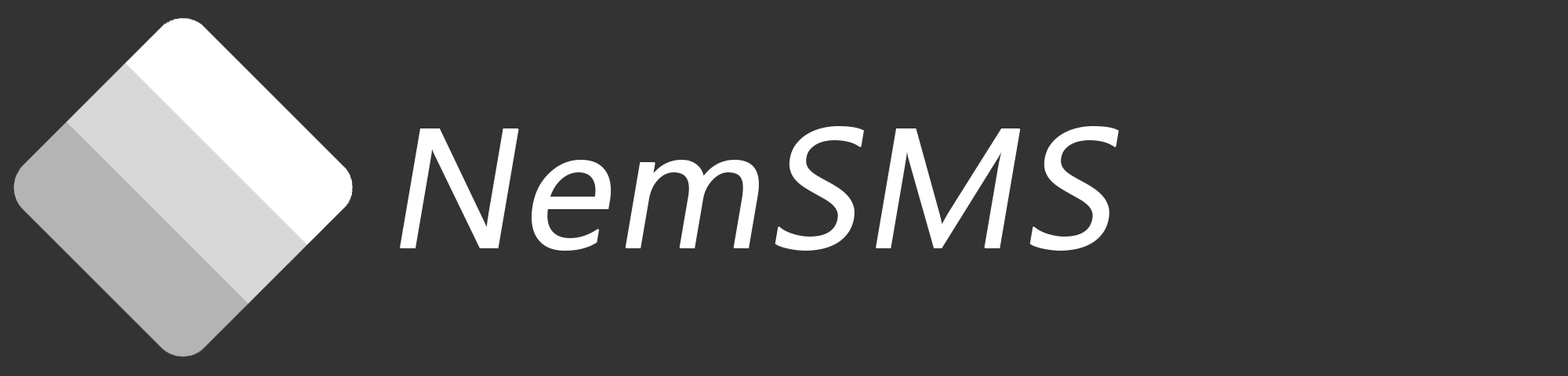
<style>
.page{position:relative;width:1568px;height:376px;background:#333333}
.page>*{position:absolute;margin:0}
.t1{font:171.1px "SegoeUI";color:#ffffff;font-weight:bold}
</style>
<div class="page">
<p class="t1" style="left:400px;top:126px;width:719px;height:125px">NemSMS</p>
</div>
